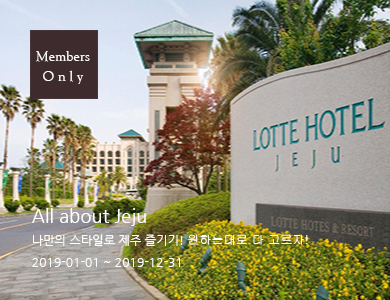
<style>
.page{position:relative;width:390px;height:300px}
.page>*{position:absolute;margin:0}
.t1{font:14.1px/19.7px "GoudyOlSt-BT";letter-spacing:0.01em;color:#ffffff}
.t2{font:12px/22px "NanumGothic";letter-spacing:0.01em;color:#ffffff}
.t3{font:18px/24px "NanumGothic";letter-spacing:0.01em;color:#ffffff}
.t4{font:12px/22px "Gulim";letter-spacing:0.01em;color:#ffffff}
</style>
<div class="page">
<p class="t1" style="left:36px;top:51px;width:54px;height:33px;text-align:center">Members<br>O n l y</p>
<p class="t2" style="left:32px;top:208px;width:276px;height:59px"><span class="t3">All about Jeju<br></span>나만의 스타일로 제주 즐기기! <span class="t4">원하는대로 다 고르자!<br></span>2019-01-01 ~ 2019-12-31</p>
</div>
